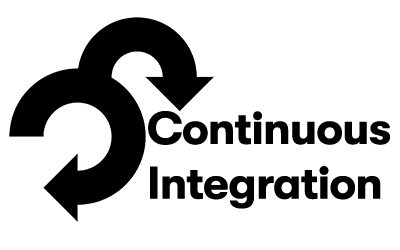
<style>
.page{position:relative;width:400px;height:250px;background:#ffffff}
.page>*{position:absolute;margin:0}
.t1{font:45.6px "GTWalsheim-Bold";letter-spacing:-0.02em;color:#000000}
</style>
<div class="page">
<p class="t1" style="left:148px;top:111px;width:242px;height:98px">Continuous<br>Integration</p>
</div>
